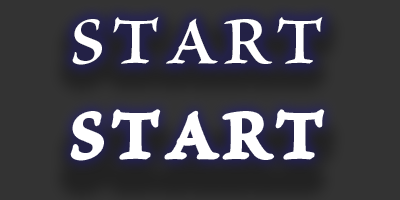
<style>
.page{position:relative;width:400px;height:200px;background:#333333}
.page>*{position:absolute;margin:0}
.t1{font:70px "TpldYiFengScripture";letter-spacing:0.1em;color:#ffffff;text-transform:uppercase}
</style>
<div class="page">
<p class="t1" style="left:72px;top:17px;width:251px;height:48px">START</p>
<p class="t1" style="left:72px;top:111px;width:251px;height:48px">START</p>
</div>
